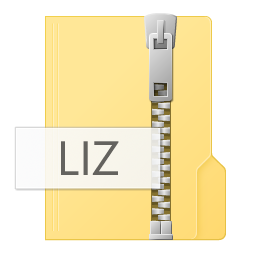
<style>
.page{position:relative;width:256px;height:256px;background:#ffffff}
.page>*{position:absolute;margin:0}
.t1{font:48px "SegoeUI";color:#64635e}
</style>
<div class="page">
<p class="t1" style="left:61px;top:141px;width:58px;height:34px">LIZ</p>
</div>
